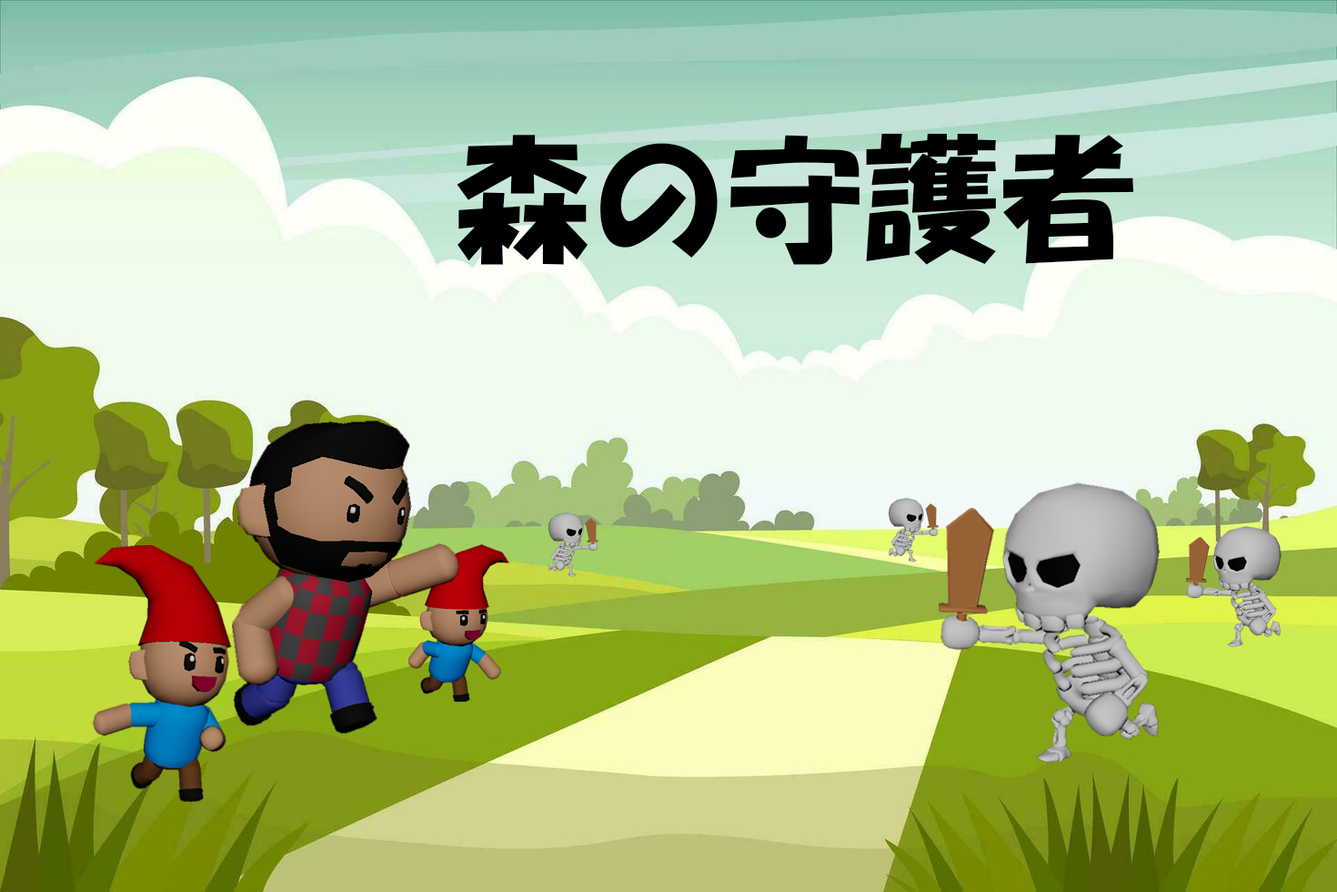
<style>
.page{position:relative;width:1337px;height:892px}
.page>*{position:absolute;margin:0}
.t1{font:136.5px "HGSoeiKakupoptai";color:#000000}
</style>
<div class="page">
<p class="t1" style="left:457px;top:134px;width:678px;height:131px">森の守護者</p>
</div>
